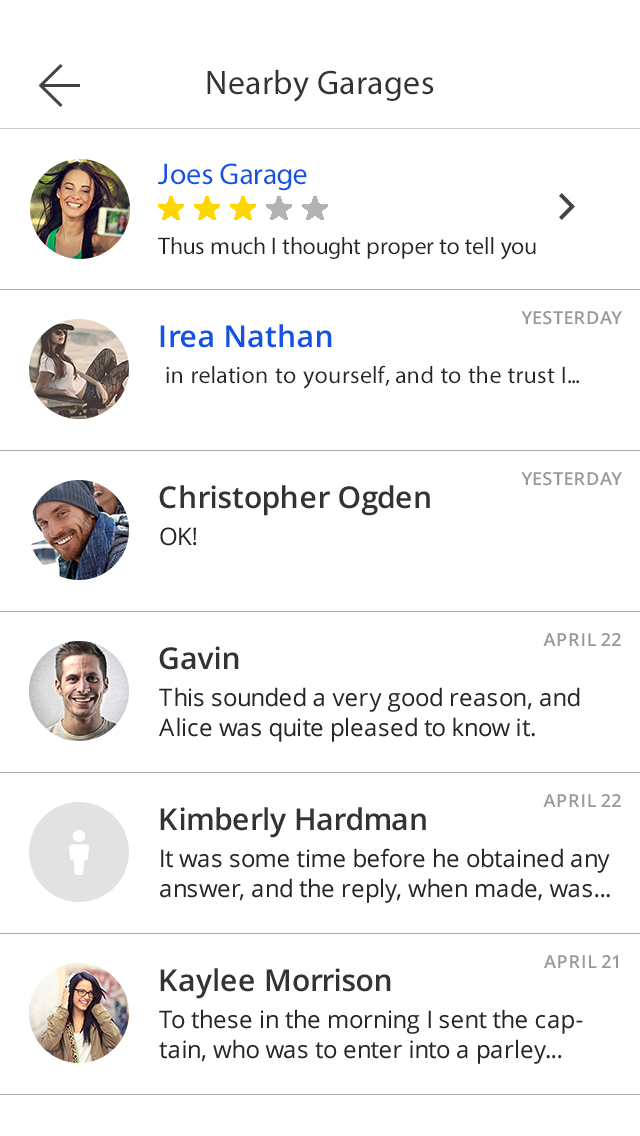
<style>
.page{position:relative;width:640px;height:1136px;background:#ffffff}
.page>*{position:absolute;margin:0}
.t1{font:34px "MyriadPro-Regular";letter-spacing:0.01em;color:#333333}
.t2{font:30px "MyriadPro-Regular";color:#1352e2}
.t3{font:24px "MyriadPro-Regular";color:#262626}
.t4{font:18px "OpenSans-Semibold";color:#999999;text-transform:uppercase}
.t5{font:30px "OpenSans-Semibold";color:#1352e2}
.t6{font:30px "OpenSans-Semibold";color:#333333}
.t7{font:24px "OpenSans";color:#262626}
.t8{font:24px/30px "OpenSans";color:#262626}
</style>
<div class="page">
<p class="t1" style="left:207px;top:69px;width:227px;height:33px">Nearby Garages</p>
<p class="t2" style="left:158px;top:163px;width:149px;height:28px">Joes Garage</p>
<p class="t3" style="left:158px;top:237px;width:378px;height:23px">Thus much I thought proper to tell you</p>
<p class="t4" style="left:521px;top:311px;width:101px;height:14px">yesterday</p>
<p class="t5" style="left:160px;top:324px;width:172px;height:24px">Irea Nathan</p>
<p class="t3" style="left:166px;top:365px;width:413px;height:24px">in relation to yourself, and to the trust I...</p>
<p class="t4" style="left:521px;top:472px;width:101px;height:14px">yesterday</p>
<p class="t6" style="left:159px;top:485px;width:271px;height:31px">Christopher Ogden</p>
<p class="t7" style="left:160px;top:527px;width:37px;height:19px">OK!</p>
<p class="t4" style="left:543px;top:633px;width:78px;height:13px">April 22</p>
<p class="t6" style="left:159px;top:646px;width:80px;height:24px">Gavin</p>
<p class="t8" style="left:159px;top:687px;width:421px;height:55px">This sounded a very good reason, and Alice was quite pleased to know it.</p>
<p class="t4" style="left:543px;top:794px;width:78px;height:13px">April 22</p>
<p class="t6" style="left:160px;top:807px;width:266px;height:31px">Kimberly Hardman</p>
<p class="t8" style="left:160px;top:848px;width:450px;height:55px">It was some time before he obtained any answer, and the reply, when made, was...</p>
<p class="t4" style="left:544px;top:955px;width:74px;height:13px">April 21</p>
<p class="t6" style="left:160px;top:968px;width:231px;height:31px">Kaylee Morrison</p>
<p class="t8" style="left:159px;top:1009px;width:424px;height:55px">To these in the morning I sent the captain, who was to enter into a parley...</p>
</div>
